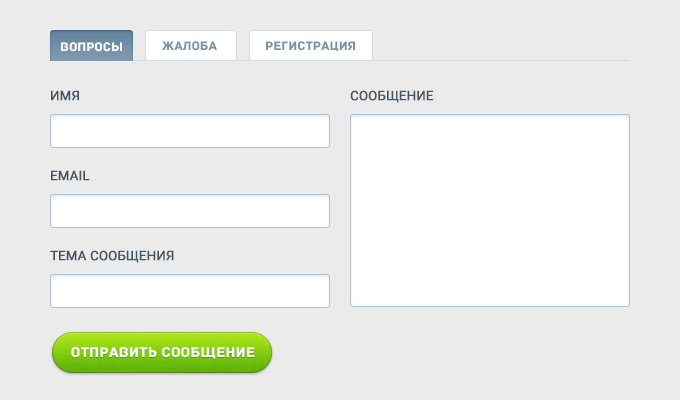
<style>
.page{position:relative;width:680px;height:400px;background:#ebebeb}
.page>*{position:absolute;margin:0}
.t1{font:13px "Archive";color:#7794aa}
.t2{font:13px "Archive";color:#ffffff}
.t3{font:13px "Roboto-Regular";color:#425666;font-weight:bold}
.t4{font:15px "Archive";color:#ffffff}
</style>
<div class="page">
<p class="t1" style="left:162px;top:41px;width:55px;height:10px">ЖАЛОБА</p>
<p class="t1" style="left:266px;top:41px;width:89px;height:11px">РЕГИСТРАЦИЯ</p>
<p class="t2" style="left:61px;top:42px;width:61px;height:10px">Вопросы</p>
<p class="t3" style="left:51px;top:90px;width:28px;height:11px">ИМЯ</p>
<p class="t3" style="left:350px;top:90px;width:84px;height:13px">СООБЩЕНИЕ</p>
<p class="t3" style="left:51px;top:170px;width:39px;height:11px">EMAIL</p>
<p class="t3" style="left:50px;top:250px;width:124px;height:13px">ТЕМА СООБЩЕНИЯ</p>
<p class="t4" style="left:71px;top:347px;width:184px;height:12px">ОТПРАВИТЬ СООБЩЕНИЕ</p>
</div>
